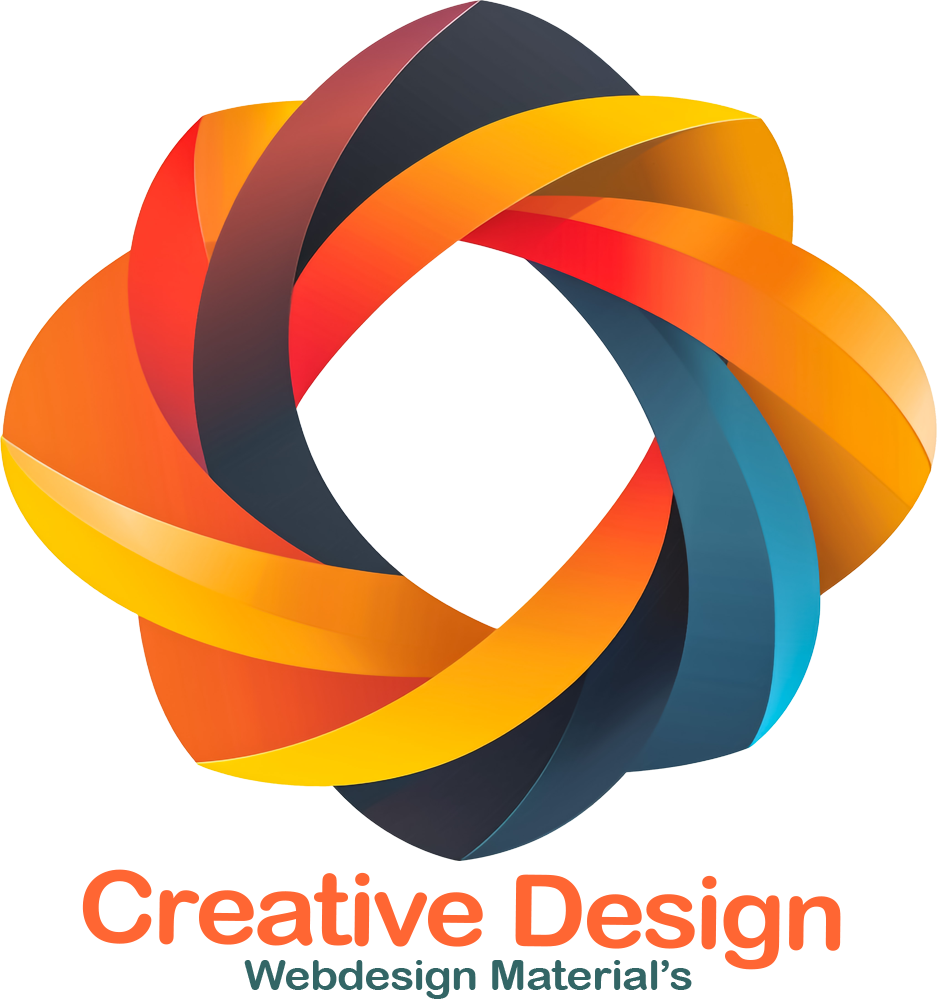
<style>
.page{position:relative;width:937px;height:1001px;background:#ffffff}
.page>*{position:absolute;margin:0}
.t1{font:100px "ArialRoundedMTBold";letter-spacing:-0.02em;color:#ff6633;scale:1.08 1}
.t2{font:41.7px "ArialRoundedMTBold";color:#336666;scale:1.08 1}
</style>
<div class="page">
<p class="t1" style="left:82px;top:869px;width:759px;height:101px;rotate:1deg">Creative Design</p>
<p class="t2" style="left:244px;top:960px;width:448px;height:39px">Webdesign Material’s</p>
</div>
